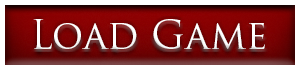
<style>
.page{position:relative;width:300px;height:70px}
.page>*{position:absolute;margin:0}
.t1{font:38.9px "TrajanPro-Regular";color:#ffffff}
</style>
<div class="page">
<p class="t1" style="left:33px;top:19px;width:232px;height:31px">Load Game</p>
</div>
